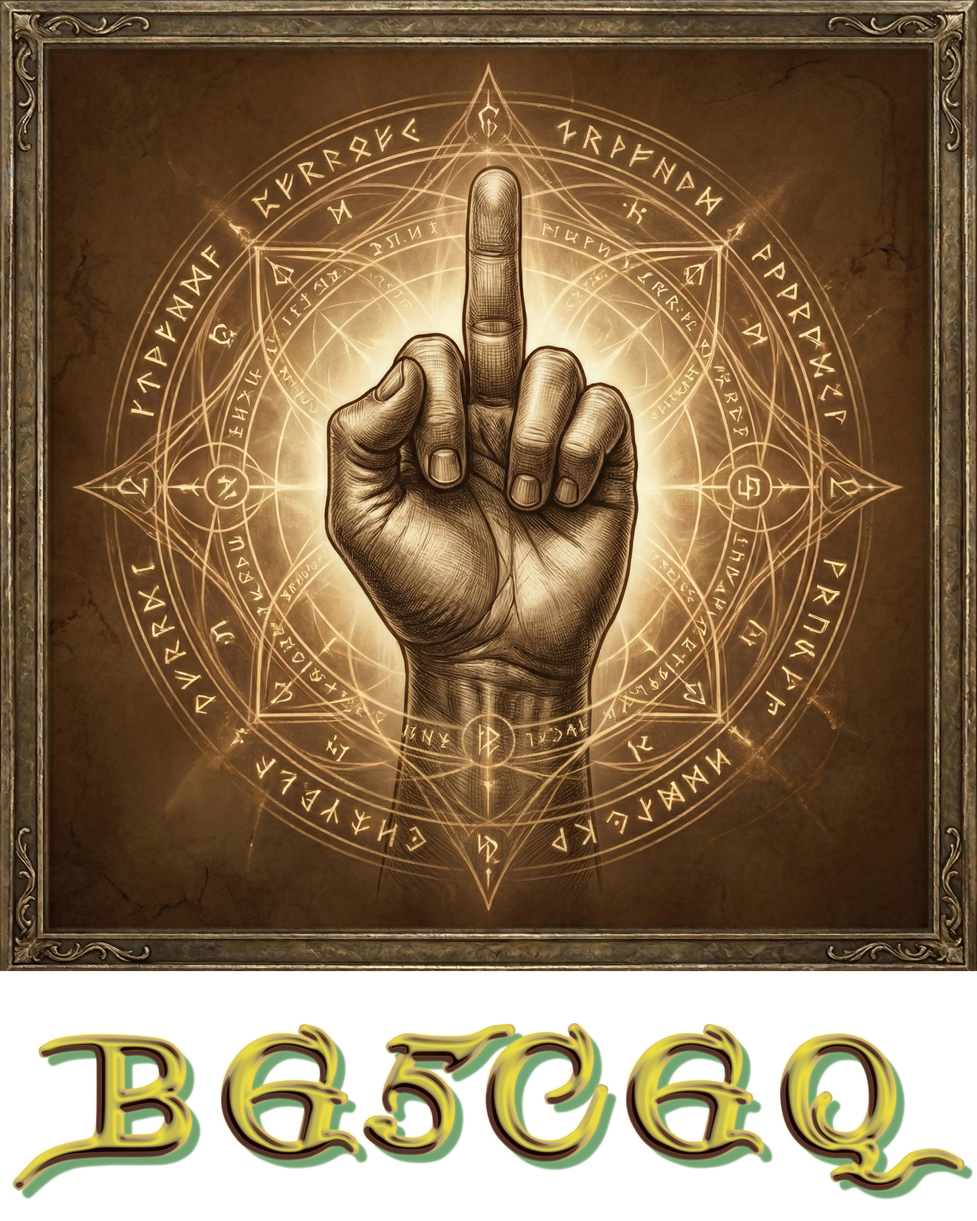
<style>
.page{position:relative;width:977px;height:1221px}
.page>*{position:absolute;margin:0}
.t1{font:166px "FairydustB";letter-spacing:0.2em;font-weight:bold}
</style>
<div class="page">
<p class="t1" style="left:17px;top:1027px;width:943px;height:159px">BG5CGQ</p>
</div>
